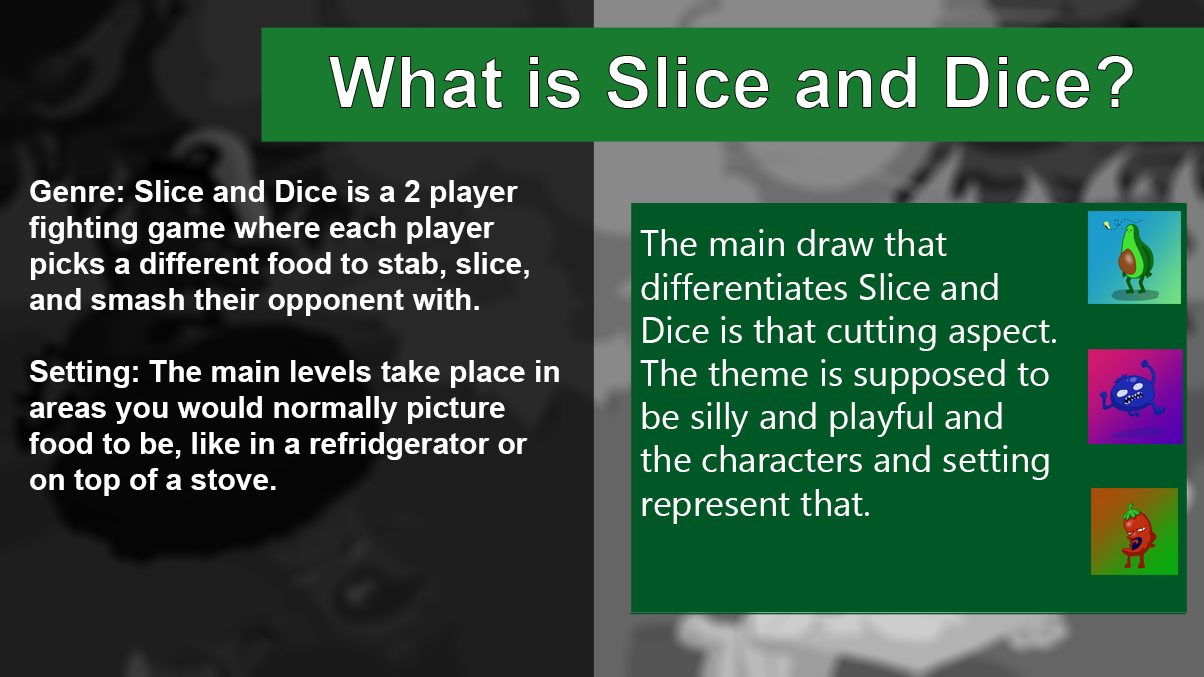
<style>
.page{position:relative;width:1204px;height:677px;background:#005826}
.page>*{position:absolute;margin:0}
.t1{font:72px "Arial-BoldMT";color:#ffffff}
.t2{font:30px "Arial-BoldMT";color:#ffffff}
</style>
<div class="page">
<p class="t1" style="left:328px;top:55px;width:806px;height:54px">What is Slice and Dice?</p>
<p class="t2" style="left:29px;top:180px;width:530px;height:316px">Genre: Slice and Dice is a 2 player fighting game where each player picks a different food to stab, slice, and smash their opponent with. <br><br>Setting: The main levels take place in areas you would normally picture food to be, like in a refridgerator or on top of a stove.</p>
</div>
